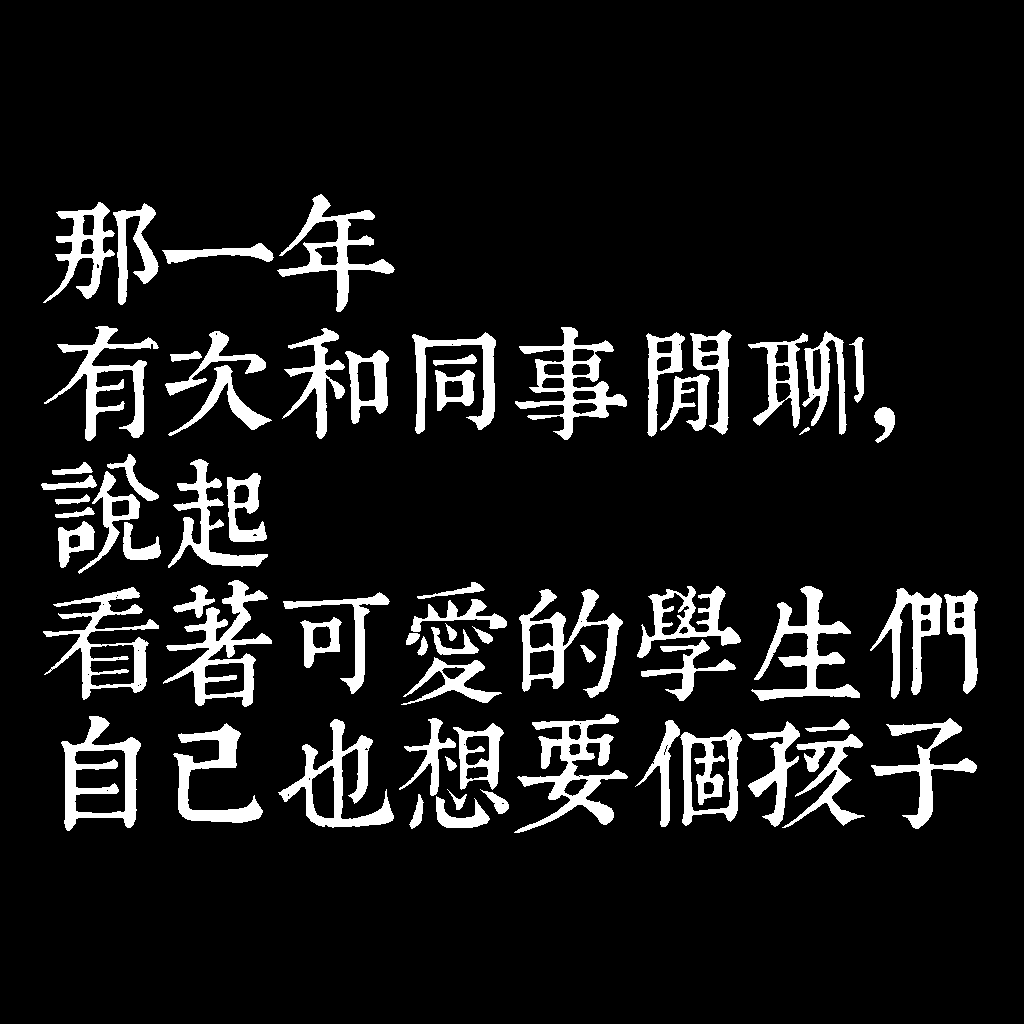
<style>
.page{position:relative;width:1024px;height:1024px;background:#000000}
.page>*{position:absolute;margin:0}
.t1{font:120px/130px "TpldKhangXiDictTrial";letter-spacing:-0.02em;color:#ffffff}
</style>
<div class="page">
<p class="t1" style="left:41px;top:194px;width:937px;height:639px">那一年<br>有次和同事閒聊，<br>說起<br>看著可愛的學生們<br>自己也想要個孩子</p>
</div>
